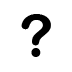
<style>
.page{position:relative;width:72px;height:72px;background:#ffffff}
.page>*{position:absolute;margin:0}
.t1{font:60px "ArialRoundedMTBold";color:#000000}
</style>
<div class="page">
<p class="t1" style="left:21px;top:14px;width:30px;height:43px">?</p>
</div>
